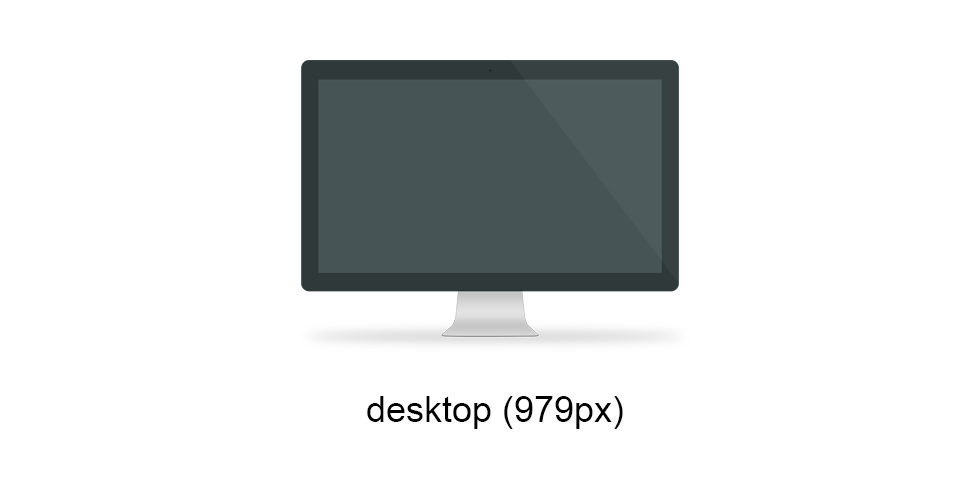
<style>
.page{position:relative;width:979px;height:480px;background:#ffffff}
.page>*{position:absolute;margin:0}
.t1{font:36px "ArialMT";color:#000000}
</style>
<div class="page">
<p class="t1" style="left:367px;top:396px;width:256px;height:33px">desktop (979px)</p>
</div>
